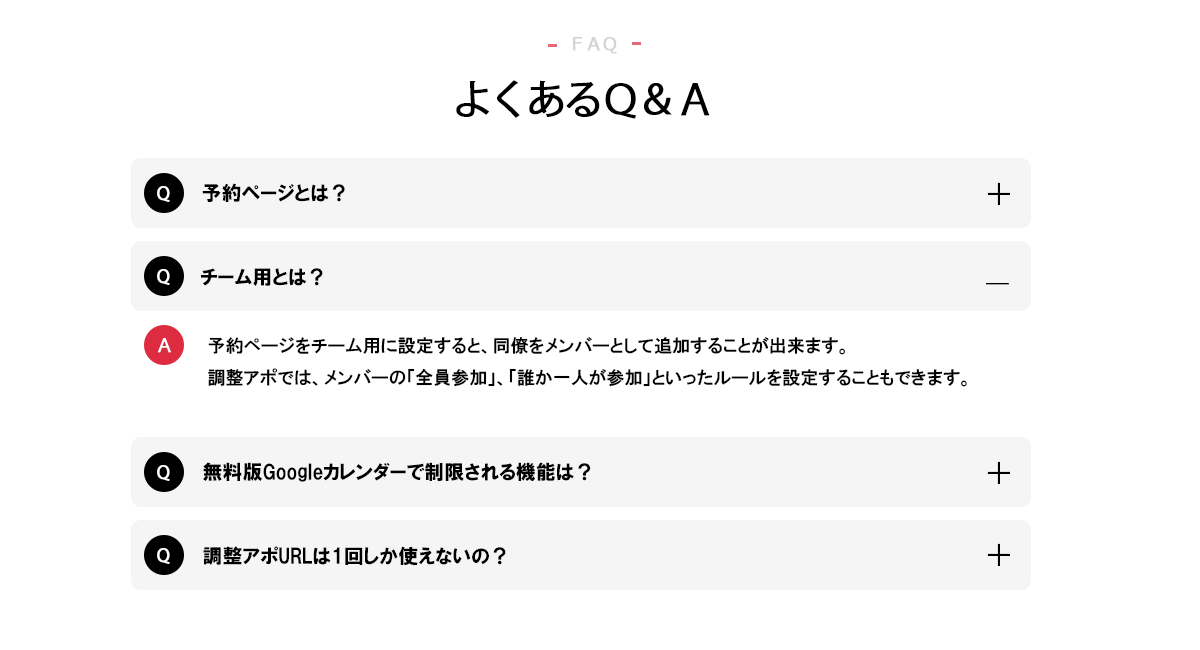
<style>
.page{position:relative;width:1200px;height:650px;background:#ffffff}
.page>*{position:absolute;margin:0}
.t1{font:18px "Meiryo";letter-spacing:-0.1em;color:#d3d3d3;font-weight:bold}
.t2{font:40px "KozGoPr6N-Regular";letter-spacing:-0.1em;color:#000000;font-weight:bold}
.t3{font:20px "HGPSoeiKakugothicUB";color:#000000}
.t4{font:30px "KozGoPr6N-Regular";letter-spacing:-0.1em;color:#000000}
.t5{font:18px "KozGoPr6N-Regular";letter-spacing:-0.1em;color:#ffffff;font-weight:bold}
.t6{font:22px "KozGoPr6N-Regular";letter-spacing:-0.1em;color:#000000;font-weight:bold}
.t7{font:18px "HGPGothicE";color:#000000}
</style>
<div class="page">
<p class="t1" style="left:573px;top:37px;width:44px;height:17px">ＦＡＱ</p>
<p class="t2" style="left:456px;top:80px;width:254px;height:39px">よくあるＱ＆Ａ</p>
<p class="t3" style="left:202px;top:183px;width:143px;height:19px">予約ページとは？</p>
<p class="t4" style="left:987px;top:182px;width:23px;height:23px">＋</p>
<p class="t5" style="left:157px;top:186px;width:13px;height:16px">Q</p>
<p class="t5" style="left:157px;top:269px;width:13px;height:16px">Q</p>
<p class="t3" style="left:201px;top:268px;width:122px;height:18px">チーム用とは？</p>
<p class="t6" style="left:986px;top:283px;width:23px;height:2px">―</p>
<p class="t5" style="left:158px;top:338px;width:13px;height:15px">Ａ</p>
<p class="t7" style="left:208px;top:337px;width:759px;height:50px">予約ページをチーム用に設定すると、同僚をメンバーとして追加することが出来ます。<br>調整アポでは、メンバーの「全員参加」、「誰か一人が参加」といったルールを設定することもできます。</p>
<p class="t3" style="left:203px;top:462px;width:388px;height:20px">無料版Googleカレンダーで制限される機能は？</p>
<p class="t4" style="left:987px;top:461px;width:23px;height:23px">＋</p>
<p class="t5" style="left:157px;top:465px;width:13px;height:16px">Q</p>
<p class="t4" style="left:987px;top:543px;width:23px;height:23px">＋</p>
<p class="t5" style="left:157px;top:548px;width:13px;height:16px">Q</p>
<p class="t3" style="left:203px;top:546px;width:303px;height:19px">調整アポURLは1回しか使えないの？</p>
</div>
